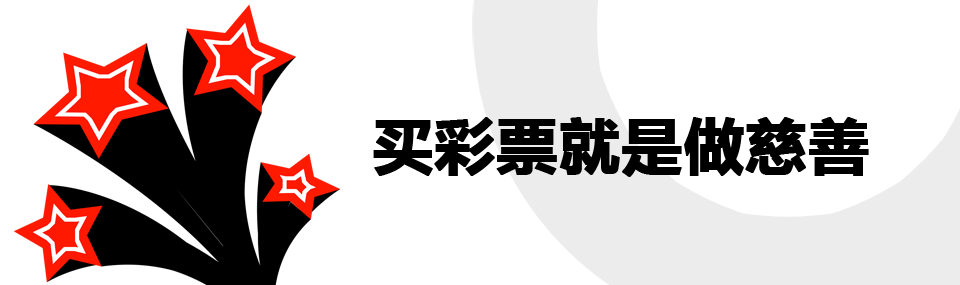
<style>
.page{position:relative;width:960px;height:285px;background:#ffffff}
.page>*{position:absolute;margin:0}
.t1{font:60px "MicrosoftYaHei-Bold";letter-spacing:0.01em;color:#000000;font-weight:bold}
</style>
<div class="page">
<p class="t1" style="left:373px;top:117px;width:496px;height:60px">买彩票就是做慈善</p>
</div>
